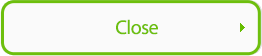
<style>
.page{position:relative;width:262px;height:56px;background:#fafafa}
.page>*{position:absolute;margin:0}
.t1{font:20px "STFangsong";letter-spacing:-0.025em;color:#6dbf0d}
</style>
<div class="page">
<p class="t1" style="left:116px;top:19px;width:42px;height:16px">Close</p>
</div>
